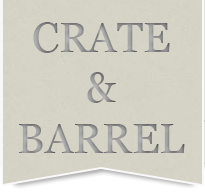
<style>
.page{position:relative;width:205px;height:196px;background:#d4d3c6}
.page>*{position:absolute;margin:0}
.t1{font:42px "Georgia";color:#989898}
</style>
<div class="page">
<p class="t1" style="left:19px;top:22px;width:166px;height:131px;text-align:center">CRATE<br>&amp;<br>BARREL</p>
</div>
